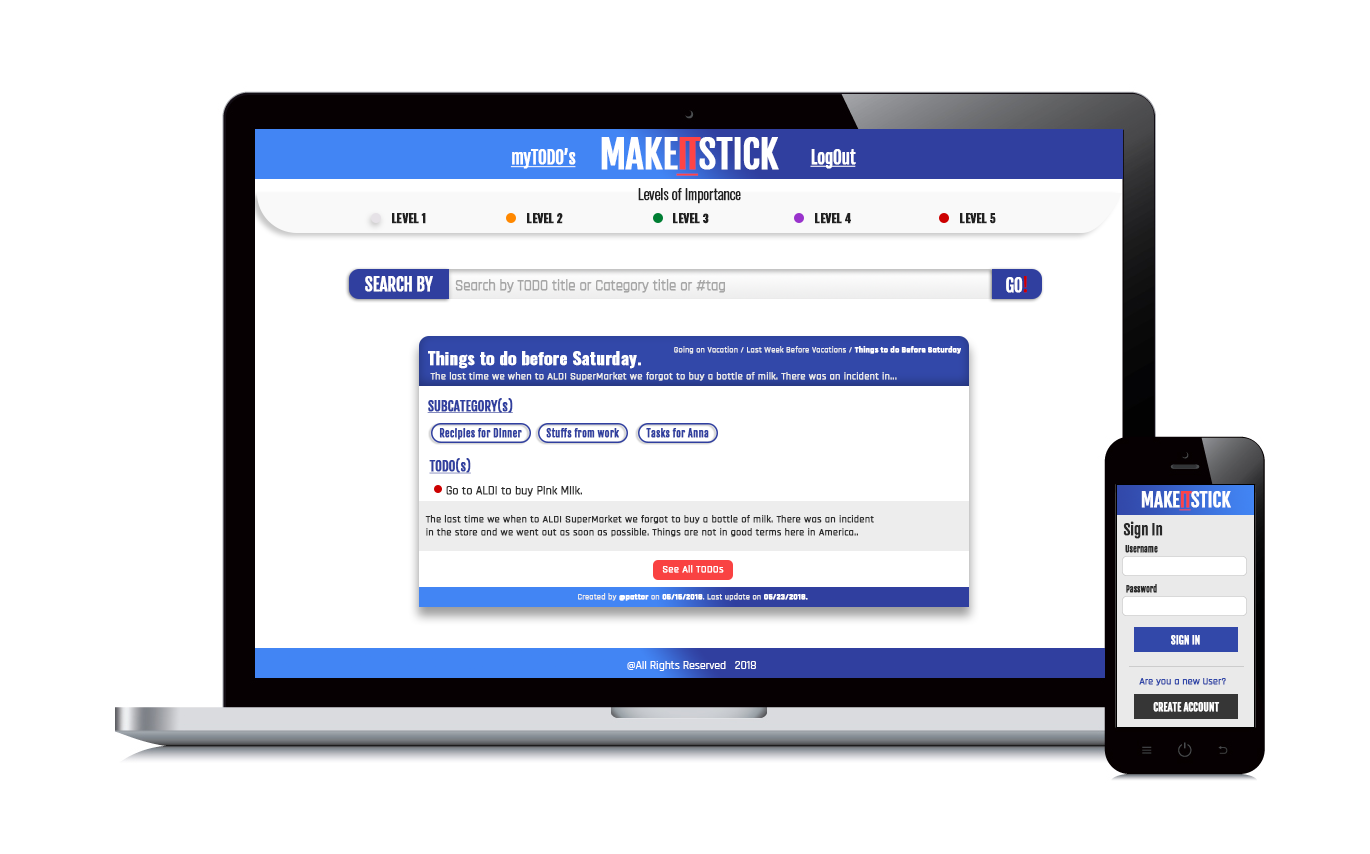
<style>
.page{position:relative;width:1370px;height:854px;background:#ffffff}
.page>*{position:absolute;margin:0}
.t1{font:37.5px "FjallaOne-Regular";letter-spacing:-0.025em;color:#ffffff;font-weight:bold}
.t2{font:37.5px "FjallaOne-Regular";letter-spacing:-0.025em;color:#ff4444;font-weight:bold;text-decoration:underline}
.t3{font:16.7px "FjallaOne-Regular";letter-spacing:-0.025em;color:#ffffff;font-weight:bold;text-decoration:underline}
.t4{font:14.6px "Oswald-Light";letter-spacing:-0.025em;color:#212121;font-weight:bold}
.t5{font:11.7px "Oswald-Bold";letter-spacing:-0.025em;color:#212121;font-weight:bold}
.t6{font:16.7px "FjallaOne-Regular";letter-spacing:-0.025em;color:#ffffff;font-weight:bold}
.t7{font:14.6px "Rajdhani-Regular";letter-spacing:-0.025em;color:#a6a6a6;font-weight:bold}
.t8{font:16.7px "FjallaOne-Regular";letter-spacing:-0.025em;color:#cc0000;font-weight:bold}
.t9{font:16.7px "Oswald-Bold";color:#ffffff;font-weight:bold}
.t10{font:8.3px "Rajdhani-Regular";color:#ededed;font-weight:bold}
.t11{font:8.3px "Rajdhani-Bold";color:#ffffff;font-weight:bold}
.t12{font:10.4px "Rajdhani-Regular";color:#ebebeb;font-weight:bold}
.t13{font:12.5px "FjallaOne-Regular";color:#303f9f;font-weight:bold;text-decoration:underline}
.t14{font:10.4px "FjallaOne-Regular";color:#303f9f;font-weight:bold}
.t15{font:11.7px "Rajdhani-Regular";color:#2e2e2e;font-weight:bold}
.t16{font:18.8px "FjallaOne-Regular";letter-spacing:-0.025em;color:#ffffff;font-weight:bold}
.t17{font:18.8px "FjallaOne-Regular";letter-spacing:-0.025em;color:#ff4444;font-weight:bold;text-decoration:underline}
.t18{font:10.4px "Rajdhani-Regular";color:#2e2e2e;font-weight:bold}
.t19{font:14.6px "FjallaOne-Regular";letter-spacing:-0.025em;color:#292929;font-weight:bold}
.t20{font:8.3px "FjallaOne-Regular";letter-spacing:-0.025em;color:#292929;font-weight:bold}
.t21{font:10.4px "Rajdhani-Regular";color:#ffffff;font-weight:bold}
.t22{font:10.4px "FjallaOne-Regular";letter-spacing:-0.025em;color:#ffffff;font-weight:bold}
.t23{font:11.7px "Rajdhani-Medium";color:#ffffff}
.t24{font:10.4px "Rajdhani-Regular";letter-spacing:-0.025em;color:#3248a9;font-weight:bold}
</style>
<div class="page">
<p class="t1" style="left:601px;top:137px;width:178px;height:39px">MAKE<span class="t2">IT</span>STICK</p>
<p class="t3" style="left:510px;top:148px;width:66px;height:21px">myTODO’s</p>
<p class="t3" style="left:810px;top:149px;width:46px;height:20px">LogOut</p>
<p class="t4" style="left:638px;top:188px;width:103px;height:16px">Levels of Importance</p>
<p class="t5" style="left:392px;top:213px;width:34px;height:11px">LEVEL 1</p>
<p class="t5" style="left:527px;top:213px;width:36px;height:11px">LEVEL 2</p>
<p class="t5" style="left:673px;top:213px;width:36px;height:11px">LEVEL 3</p>
<p class="t5" style="left:815px;top:213px;width:36px;height:11px">LEVEL 4</p>
<p class="t5" style="left:960px;top:213px;width:36px;height:11px">LEVEL 5</p>
<p class="t6" style="left:365px;top:276px;width:68px;height:16px">SEARCH BY</p>
<p class="t7" style="left:455px;top:279px;width:270px;height:14px">Search by TODO title or Category title or #tag</p>
<p class="t6" style="left:1006px;top:276px;width:21px;height:17px">GO<span class="t8">!</span></p>
<p class="t9" style="left:428px;top:351px;width:213px;height:18px">Things to do before Saturday.</p>
<p class="t10" style="left:674px;top:346px;width:287px;height:8px">Going on Vacation / Last Week Before Vacations / <span class="t11">Things to do Before Saturday</span></p>
<p class="t12" style="left:430px;top:372px;width:467px;height:9px">The last time we when to ALDI SuperMarket we forgot to buy a bottle of milk. There was an incident in...</p>
<p class="t13" style="left:427px;top:398px;width:86px;height:15px">SUBCATEGORY(s)</p>
<p class="t14" style="left:439px;top:428px;width:83px;height:12px">Recipies for Dinner</p>
<p class="t14" style="left:546px;top:428px;width:73px;height:10px">Stuffs from work</p>
<p class="t14" style="left:646px;top:428px;width:63px;height:10px">Tasks for Anna</p>
<p class="t13" style="left:429px;top:458px;width:42px;height:16px">TODO(s)</p>
<p class="t15" style="left:446px;top:486px;width:136px;height:11px">Go to ALDI to buy Pink Milk.</p>
<p class="t16" style="left:1141px;top:491px;width:90px;height:20px">MAKE<span class="t17">IT</span>STICK</p>
<p class="t18" style="left:425px;top:515px;width:449px;height:22px">The last time we when to ALDI SuperMarket we forgot to buy a bottle of milk. There was an incident <br>in the store and we went out as soon as possible. Things are not in good terms here in America..</p>
<p class="t19" style="left:1123px;top:521px;width:40px;height:18px">Sign In</p>
<p class="t20" style="left:1125px;top:545px;width:33px;height:8px">Username</p>
<p class="t21" style="left:662px;top:565px;width:62px;height:8px">See All TODOs</p>
<p class="t10" style="left:578px;top:593px;width:230px;height:8px">Created by <span class="t11">@pattor</span> on <span class="t11">05/15/2018</span>. Last update on <span class="t11">05/23/2018.</span></p>
<p class="t20" style="left:1126px;top:584px;width:31px;height:9px">Password</p>
<p class="t22" style="left:1171px;top:635px;width:29px;height:10px">SIGN IN</p>
<p class="t23" style="left:627px;top:661px;width:129px;height:10px">@All Rights Reserved   2018</p>
<p class="t24" style="left:1139px;top:678px;width:87px;height:8px">Are you a new User?</p>
<p class="t22" style="left:1153px;top:702px;width:67px;height:10px">CREATE ACCOUNT</p>
</div>
